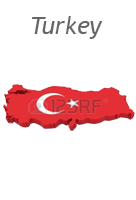
<style>
.page{position:relative;width:136px;height:200px;background:#ffffff}
.page>*{position:absolute;margin:0}
.t1{font:24px "TrebuchetMS-Italic";color:#666666}
</style>
<div class="page">
<p class="t1" style="left:31px;top:16px;width:72px;height:23px">Turkey</p>
</div>
